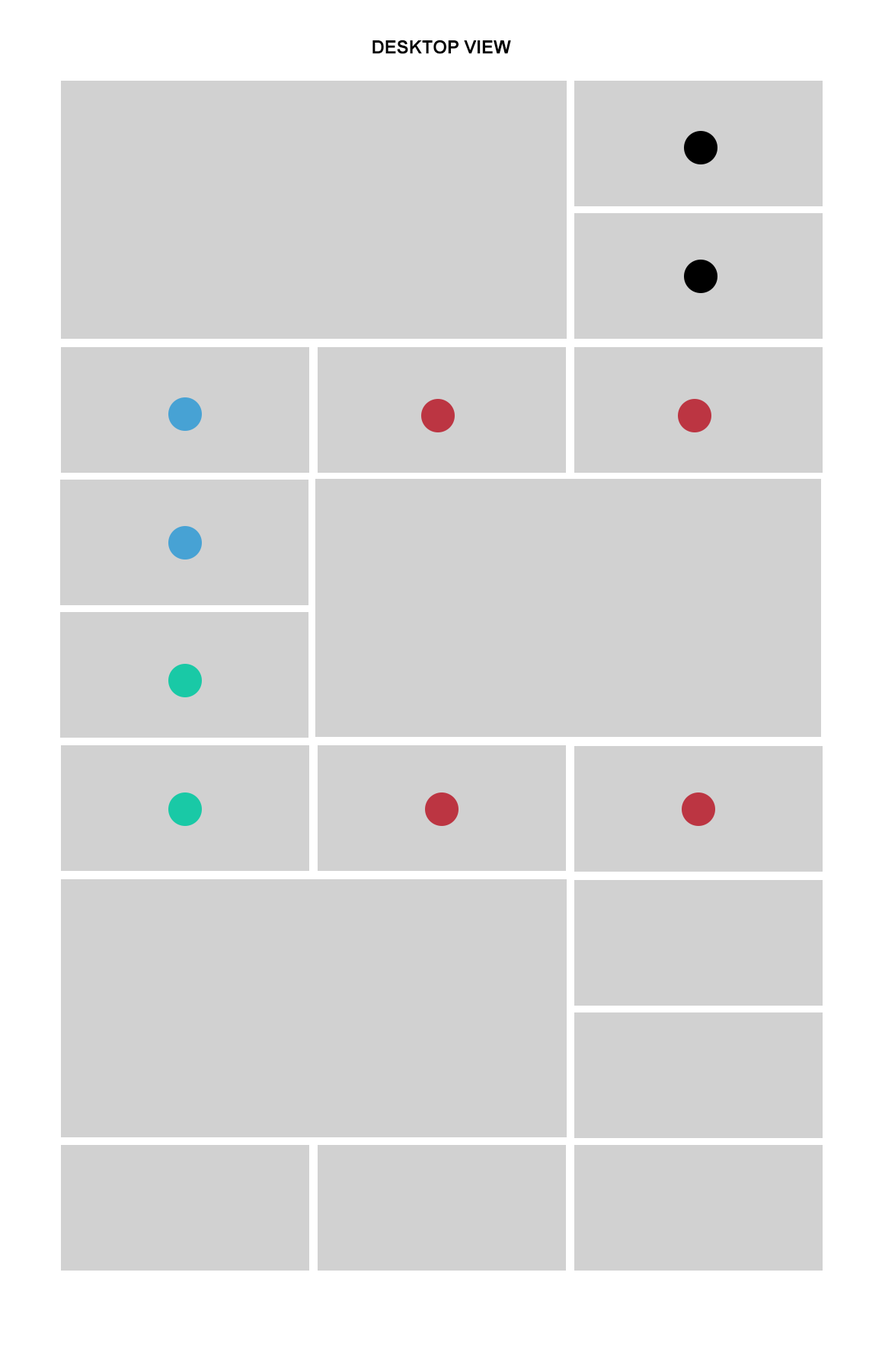
<style>
.page{position:relative;width:882px;height:1352px;background:#d1d1d1}
.page>*{position:absolute;margin:0}
.t1{font:18.3px "Arial-BoldMT";color:#000000}
</style>
<div class="page">
<p class="t1" style="left:372px;top:40px;width:139px;height:14px">DESKTOP VIEW</p>
</div>
